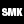
<style>
.page{position:relative;width:24px;height:24px;background:#000000}
.page>*{position:absolute;margin:0}
.t1{font:10.4px "Hill-Heavy";color:#ffffff}
</style>
<div class="page">
<p class="t1" style="left:2px;top:8px;width:21px;height:8px">SMK</p>
</div>
